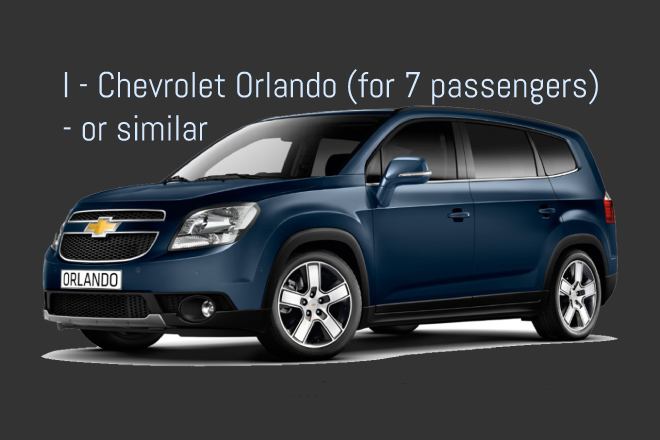
<style>
.page{position:relative;width:660px;height:440px;background:#333333}
.page>*{position:absolute;margin:0}
.t1{font:36px "Abel-Regular";color:#d5e9ff}
</style>
<div class="page">
<p class="t1" style="left:63px;top:68px;width:535px;height:73px">I - Chevrolet Orlando (for 7 passengers) - or similar</p>
</div>
